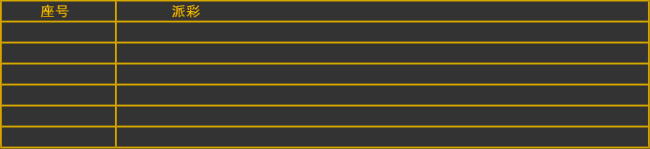
<style>
.page{position:relative;width:650px;height:149px;background:#333333}
.page>*{position:absolute;margin:0}
.t1{font:14px "SimHei";color:#c79f00;font-weight:bold;scale:1.03 1}
.t2{font:14px "SimHei";color:#d0a200;font-weight:bold;scale:1.03 1}
</style>
<div class="page">
<p class="t1" style="left:40px;top:4px;width:29px;height:14px">座号</p>
<p class="t2" style="left:172px;top:4px;width:28px;height:14px">派彩</p>
</div>
